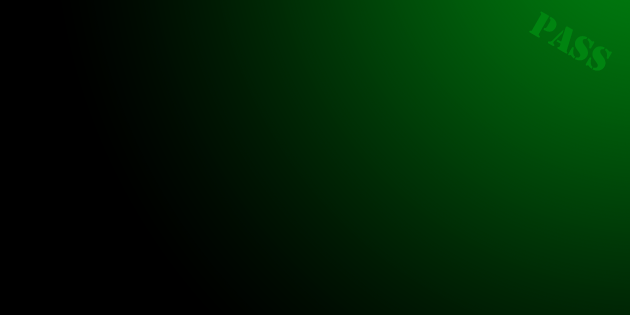
<style>
.page{position:relative;width:630px;height:315px}
.page>*{position:absolute;margin:0}
.t1{font:36px "Stencil";color:#008410}
</style>
<div class="page">
<p class="t1" style="left:529px;top:11px;width:83px;height:60px;rotate:30deg">PASS</p>
</div>
